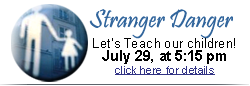
<style>
.page{position:relative;width:250px;height:86px;background:#ffffff}
.page>*{position:absolute;margin:0}
.t1{font:26px "Pristina-Regular";color:#31659c}
.t2{font:13px/12.8px "ArialMT";color:#000000}
.t3{font:14.2px/12.8px "Arial-BoldMT";color:#000000}
.t4{font:11px/12.8px "ArialMT";color:#323485;text-decoration:underline}
</style>
<div class="page">
<p class="t1" style="left:89px;top:9px;width:144px;height:30px">Stranger Danger</p>
<p class="t2" style="left:93px;top:38px;width:142px;height:37px;text-align:center">Let’s Teach our children!<br><span class="t3">July 29, at 5:15 pm<br></span><span class="t4">click here for details</span></p>
</div>
